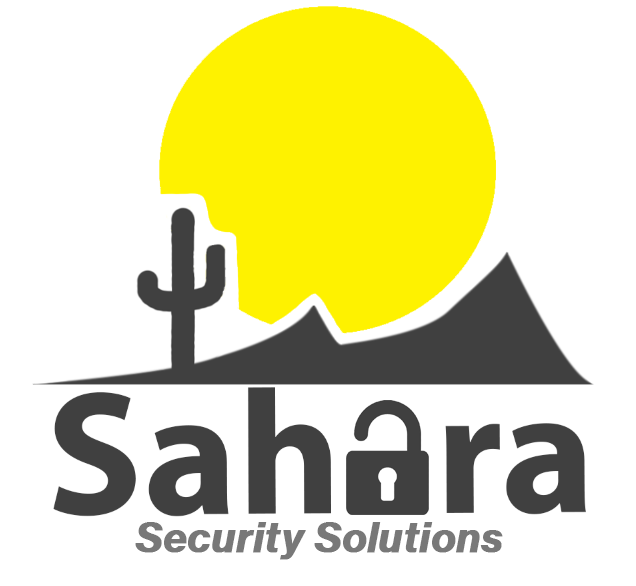
<style>
.page{position:relative;width:636px;height:586px;background:#ffffff}
.page>*{position:absolute;margin:0}
.t1{font:40px "NeueHaasGroteskTextPro-BoldItalic";color:#787878;font-weight:bold}
</style>
<div class="page">
<p class="t1" style="left:135px;top:522px;width:368px;height:38px">Security Solutions</p>
</div>
